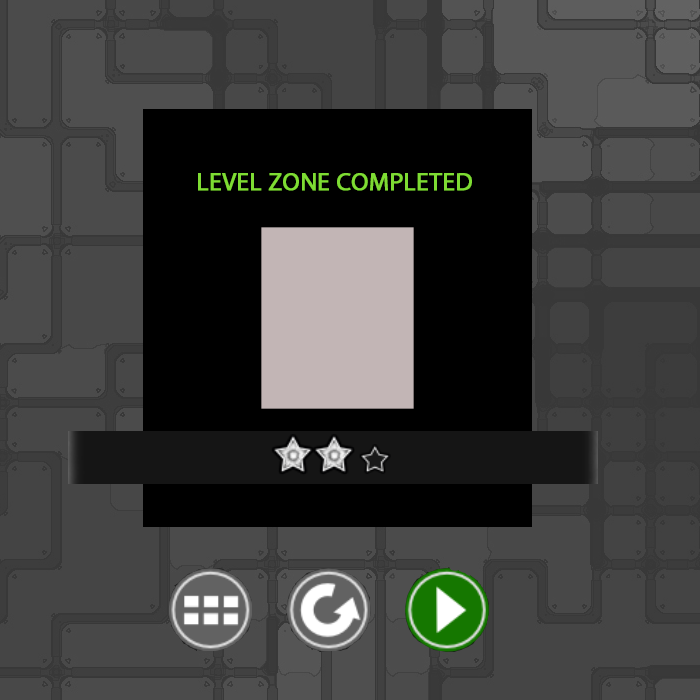
<style>
.page{position:relative;width:700px;height:700px;background:#000000}
.page>*{position:absolute;margin:0}
.t1{font:25px "MyriadPro-Regular";color:#7edc33;font-weight:bold}
</style>
<div class="page">
<p class="t1" style="left:198px;top:173px;width:274px;height:18px">LEVEL ZONE COMPLETED</p>
</div>
